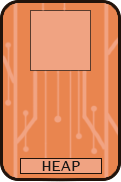
<style>
.page{position:relative;width:121px;height:182px;background:#e9854f}
.page>*{position:absolute;margin:0}
.t1{font:16px "LucidaConsole";color:#171615}
</style>
<div class="page">
<p class="t1" style="left:42px;top:161px;width:38px;height:10px">HEAP</p>
</div>
